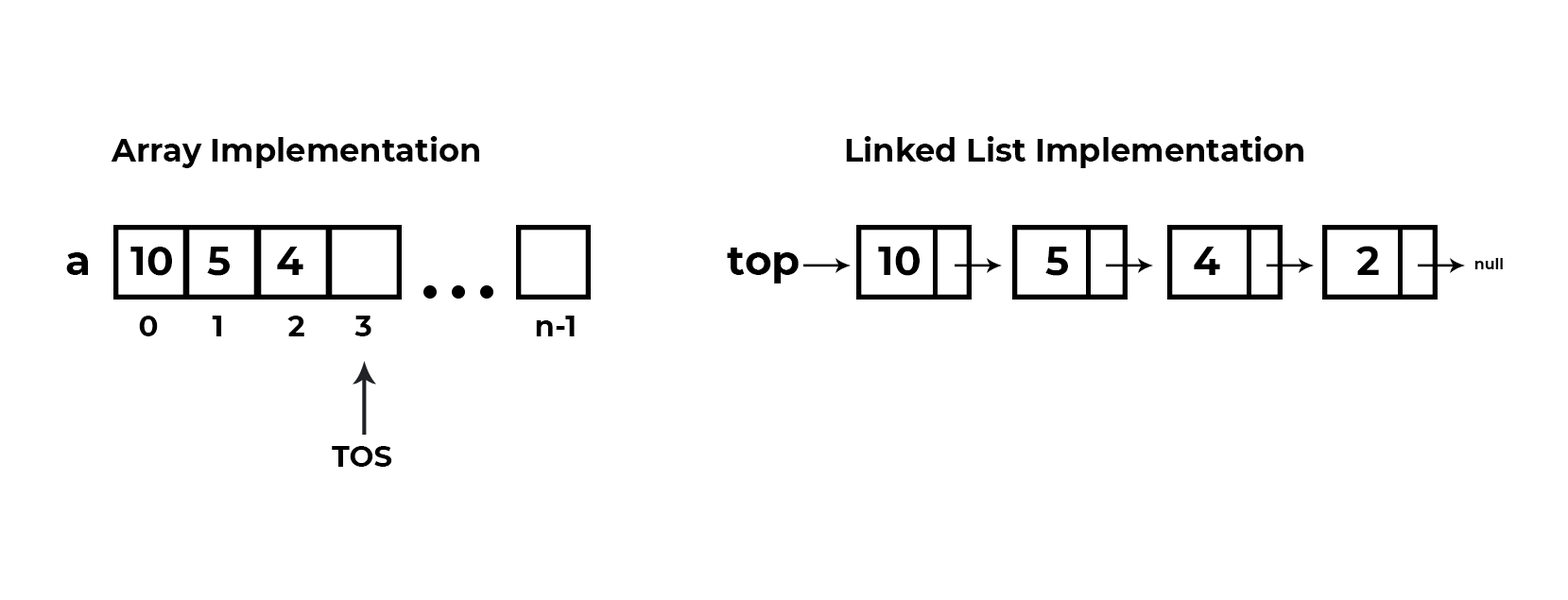
<style>
.page{position:relative;width:1568px;height:600px;background:#ffffff}
.page>*{position:absolute;margin:0}
.t1{font:32.2px "Montserrat-Bold";color:#000000}
.t2{font:39.8px "Montserrat-Bold";color:#000000}
.t3{font:41.5px "Montserrat-Bold";color:#000000}
.t4{font:40px "Montserrat-Bold";color:#000000}
.t5{font:15px "Montserrat-Bold";color:#000000}
.t6{font:28.8px "Montserrat-Bold";color:#000000}
.t7{font:29.6px "Montserrat-Bold";color:#000000}
</style>
<div class="page">
<p class="t1" style="left:111px;top:136px;width:368px;height:32px">Array Implementation</p>
<p class="t1" style="left:846px;top:136px;width:457px;height:32px">Linked List Implementation</p>
<p class="t2" style="left:878px;top:246px;width:501px;height:30px">10           5           4            2</p>
<p class="t3" style="left:66px;top:252px;width:22px;height:23px">a</p>
<p class="t4" style="left:130px;top:247px;width:173px;height:29px">10   5    4</p>
<p class="t3" style="left:727px;top:248px;width:72px;height:36px">top</p>
<p class="t5" style="left:1474px;top:258px;width:29px;height:11px">null</p>
<p class="t6" style="left:139px;top:316px;width:19px;height:20px">0</p>
<p class="t6" style="left:212px;top:316px;width:10px;height:20px">1</p>
<p class="t6" style="left:287px;top:316px;width:17px;height:20px">2</p>
<p class="t6" style="left:354px;top:316px;width:17px;height:20px">3</p>
<p class="t6" style="left:536px;top:316px;width:39px;height:20px">n-1</p>
<p class="t7" style="left:332px;top:446px;width:60px;height:21px">TOS</p>
</div>
